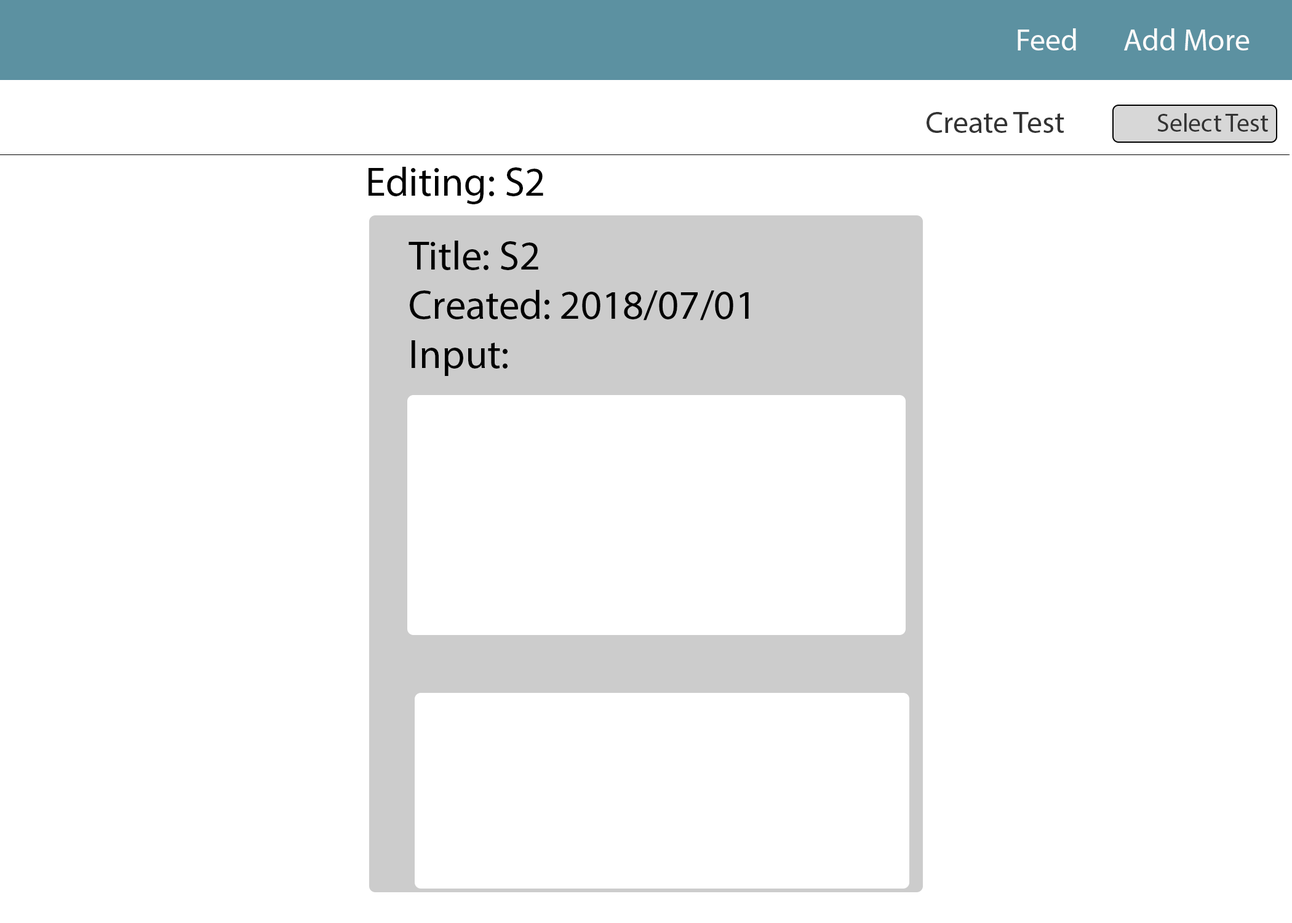
<style>
.page{position:relative;width:1292px;height:923px;background:#ffffff}
.page>*{position:absolute;margin:0}
.t1{font:30.8px "MyriadPro-Regular";color:#fbfbfb}
.t2{font:7.4px "MyriadPro-Regular";color:#333333}
.t3{font:25.6px "MyriadPro-Regular";color:#333333}
.t4{font:41px "MyriadPro-Regular";color:#000000}
</style>
<div class="page">
<p class="t1" style="left:1018px;top:28px;width:58px;height:22px">Feed</p>
<p class="t1" style="left:1124px;top:28px;width:126px;height:22px">Add More</p>
<p class="t2" style="left:927px;top:112px;width:137px;height:21px">Create Test</p>
<p class="t3" style="left:1157px;top:113px;width:111px;height:19px">Select Test</p>
<p class="t4" style="left:369px;top:167px;width:174px;height:37px">Editing: S2</p>
<p class="t4" style="left:409px;top:241px;width:340px;height:135px">Title: S2<br>Created: 2018/07/01<br>Input:</p>
</div>
